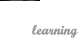
<style>
.page{position:relative;width:83px;height:40px;background:#ffffff}
.page>*{position:absolute;margin:0}
.t1{font:13.9px "ScriptMTBold";color:#979797}
</style>
<div class="page">
<p class="t1" style="left:32px;top:24px;width:46px;height:14px">learning</p>
</div>
